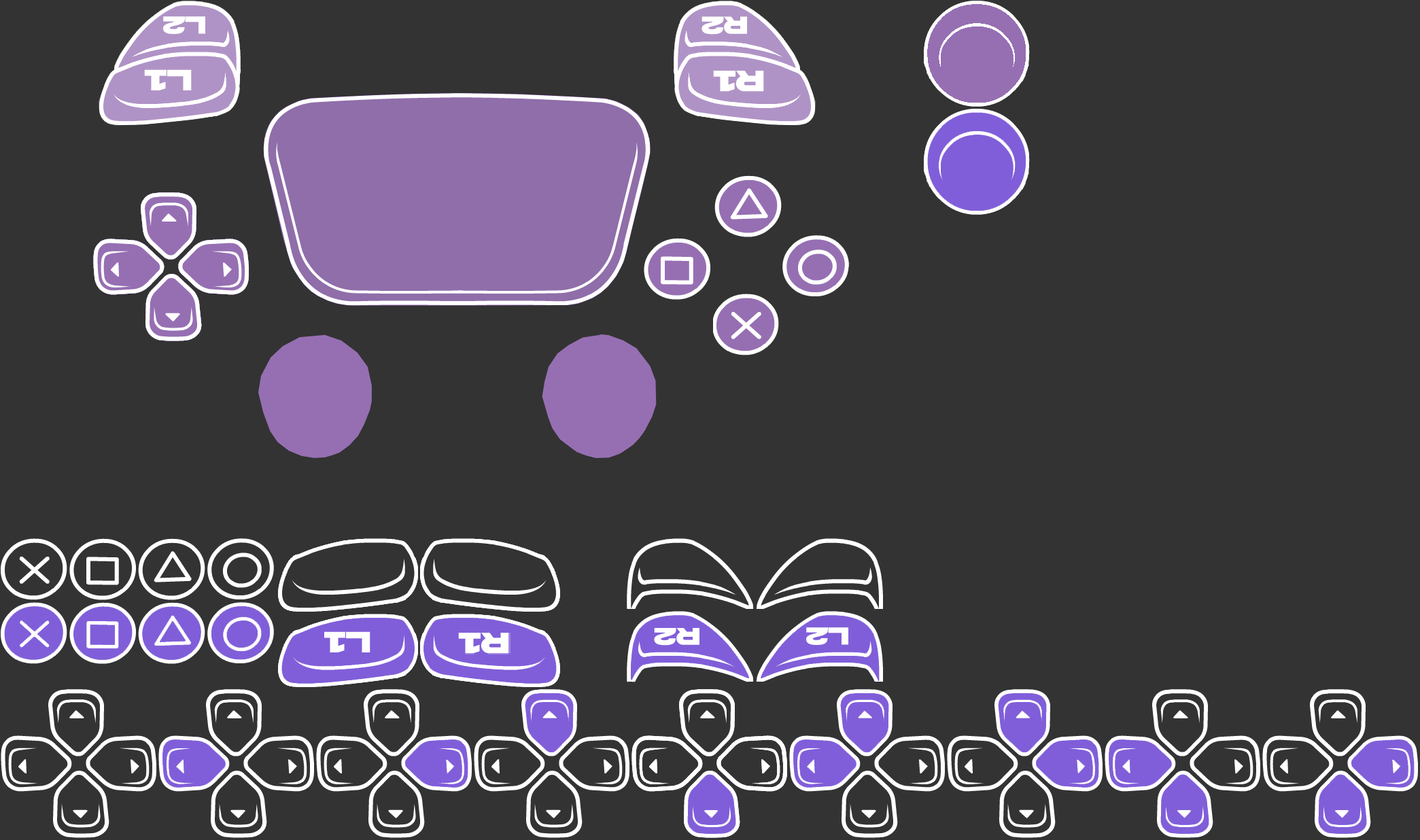
<style>
.page{position:relative;width:1420px;height:840px;background:#333333}
.page>*{position:absolute;margin:0}
.t1{font:26.1px "AkiraExpanded-SuperBold";color:#ffffff}
.t2{font:31.2px "AkiraExpanded-SuperBold";color:#ffffff}
</style>
<div class="page">
<p class="t1" style="left:163px;top:16px;width:42px;height:18px;rotate:-180deg">L2</p>
<p class="t1" style="left:701px;top:16px;width:46px;height:19px;rotate:180deg">R2</p>
<p class="t2" style="left:144px;top:69px;width:48px;height:21px;rotate:-180deg">L1</p>
<p class="t2" style="left:713px;top:71px;width:51px;height:21px;rotate:180deg">R1</p>
</div>
